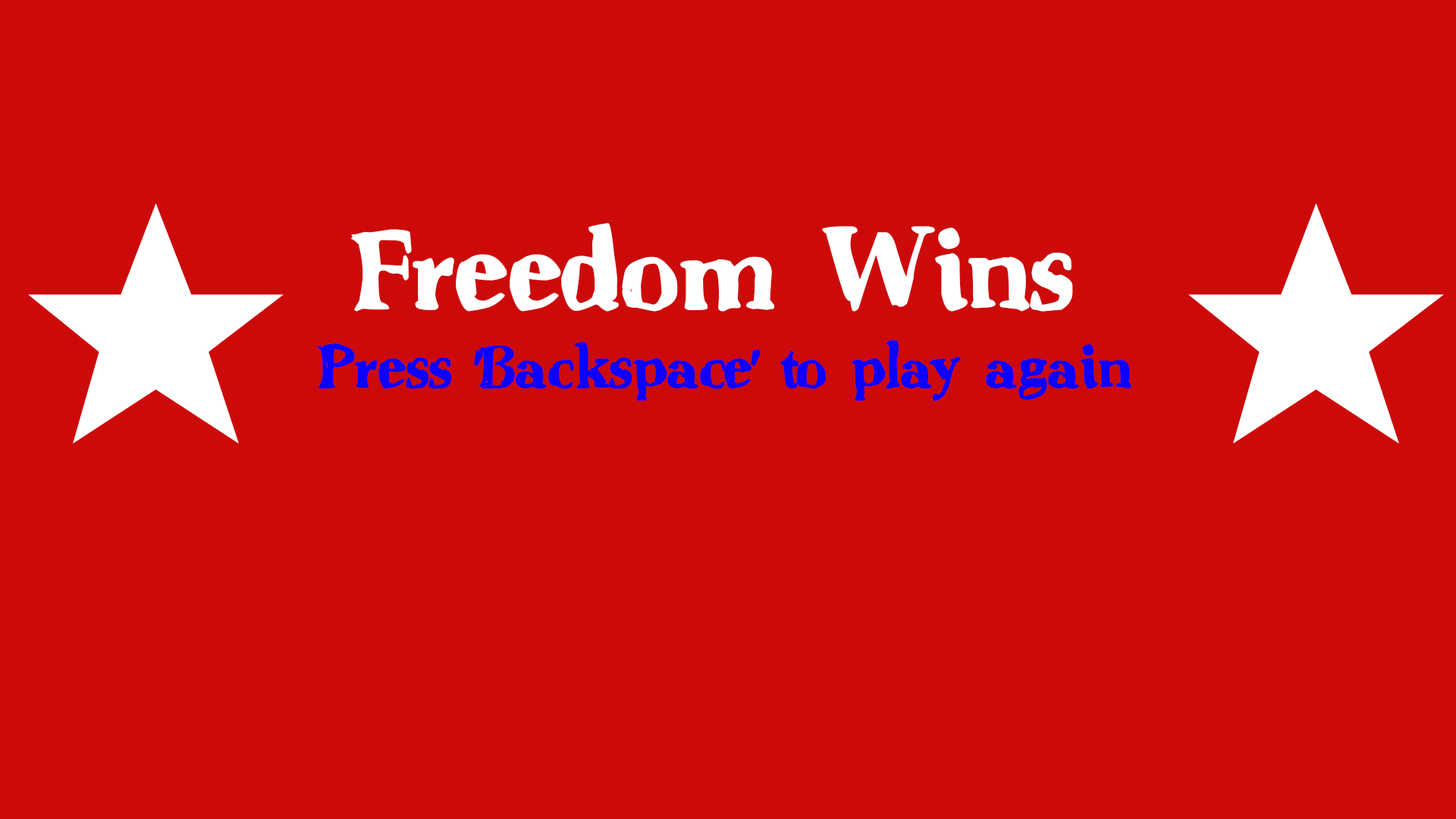
<style>
.page{position:relative;width:1456px;height:819px;background:#cd0a0a}
.page>*{position:absolute;margin:0}
.t1{font:113.7px "CountryGold";color:#ffffff}
.t2{font:60.7px "CountryGold";color:#0c00ff}
</style>
<div class="page">
<p class="t1" style="left:351px;top:223px;width:722px;height:89px">Freedom Wins</p>
<p class="t2" style="left:318px;top:340px;width:813px;height:61px">Press 'Backspace' to play again</p>
</div>
